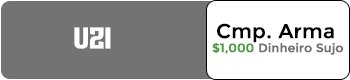
<style>
.page{position:relative;width:350px;height:80px;background:#737373}
.page>*{position:absolute;margin:0}
.t1{font:30px "Septacharge";color:#ffffff;font-weight:bold}
.t2{font:20px "Montserrat-Regular";color:#000000;font-weight:bold}
.t3{font:12px "Montserrat-Regular";color:#4b9839;font-weight:bold}
.t4{font:12px "Montserrat-Regular";color:#6f6f6f;font-weight:bold}
</style>
<div class="page">
<p class="t1" style="left:74px;top:27px;width:37px;height:22px">uzi</p>
<p class="t2" style="left:217px;top:23px;width:117px;height:20px">Cmp. Arma</p>
<p class="t3" style="left:212px;top:43px;width:42px;height:11px">$1,000</p>
<p class="t4" style="left:259px;top:43px;width:84px;height:12px">Dinheiro Sujo</p>
</div>
